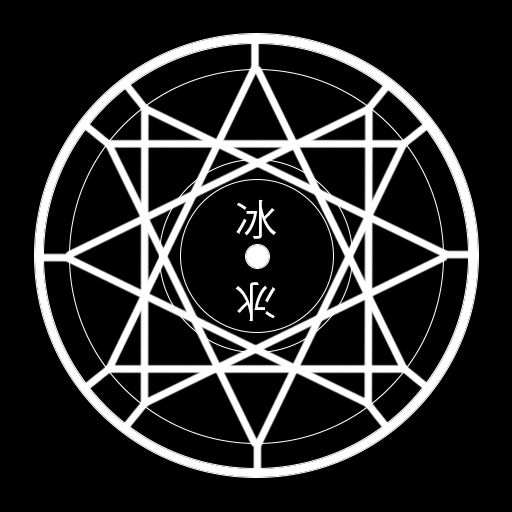
<style>
.page{position:relative;width:512px;height:512px;background:#000000}
.page>*{position:absolute;margin:0}
.t1{font:41.7px "KozGoPr6N-Regular";color:#ffffff}
.t2{font:41.7px "CenturyGothic-Bold";color:#ffffff}
</style>
<div class="page">
<p class="t1" style="left:236px;top:199px;width:40px;height:40px"><span class="t2"><br></span>冰</p>
<p class="t1" style="left:235px;top:282px;width:41px;height:40px;rotate:180deg"><span class="t2"><br></span>冰</p>
</div>
